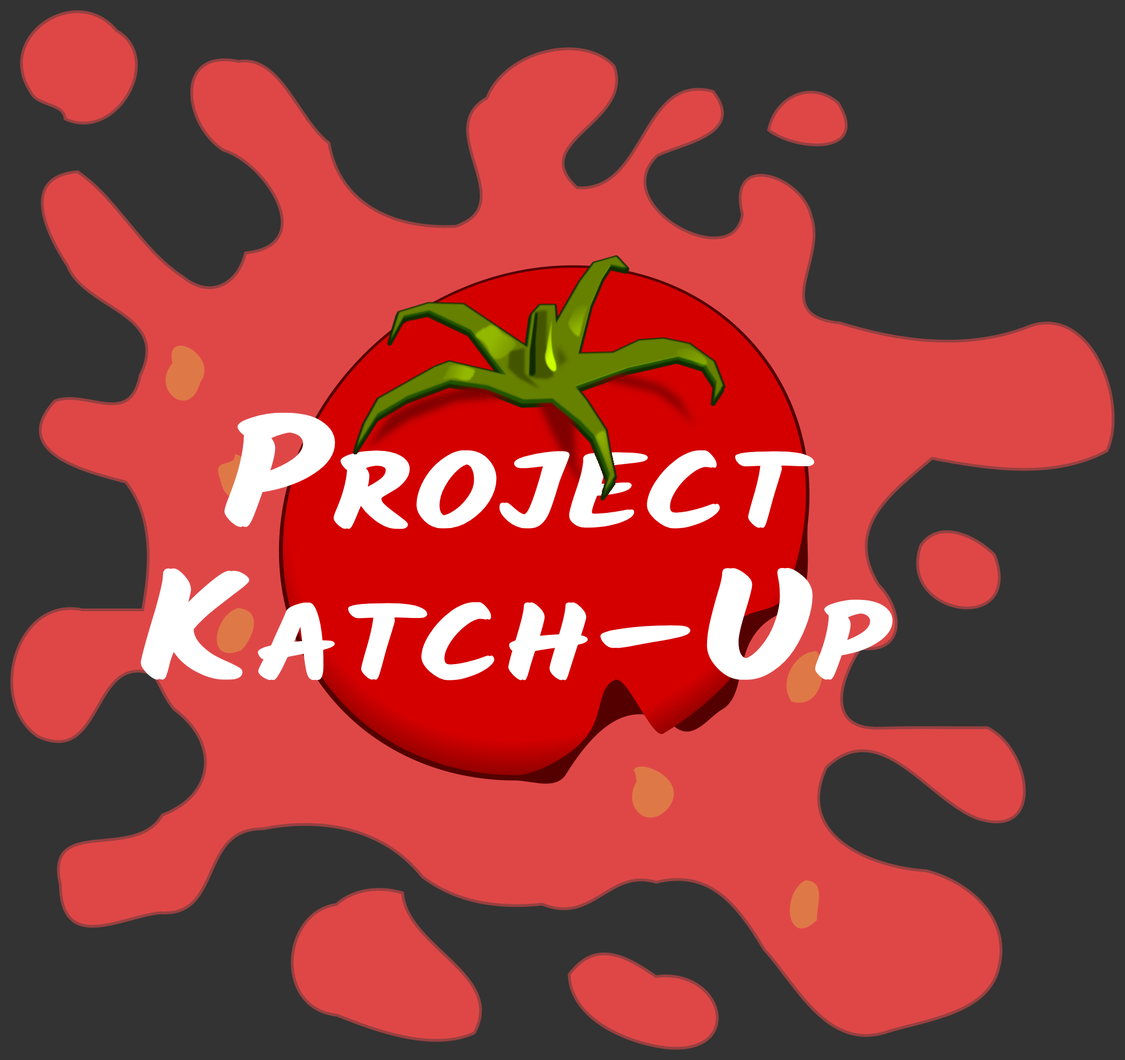
<style>
.page{position:relative;width:1125px;height:1060px;background:#333333}
.page>*{position:absolute;margin:0}
.t1{font:151.8px "Kalam-Bold";color:#ffffff;font-variant:small-caps;font-weight:bold;scale:1.25 1}
</style>
<div class="page">
<p class="t1" style="left:141px;top:413px;width:752px;height:268px;text-align:center">Project<br>Katch-Up</p>
</div>
